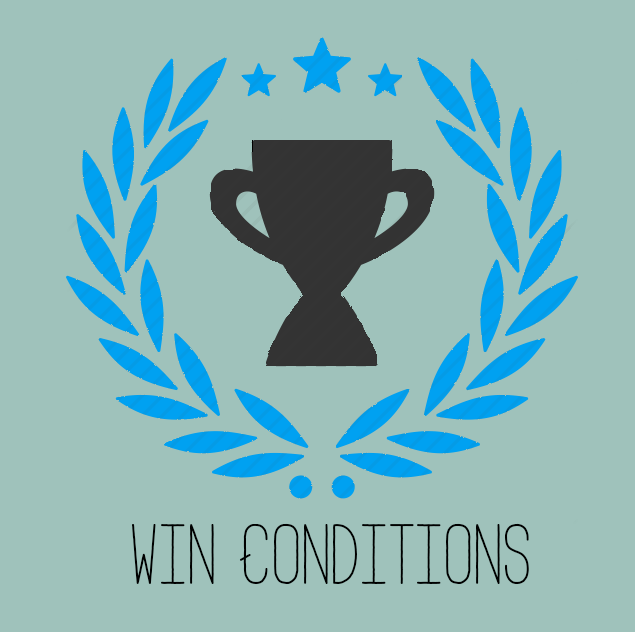
<style>
.page{position:relative;width:635px;height:632px;background:#9fc2bb}
.page>*{position:absolute;margin:0}
.t1{font:120px "Adrift";color:#000000}
</style>
<div class="page">
<p class="t1" style="left:132px;top:523px;width:397px;height:61px">Win Conditions</p>
</div>
